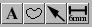
<style>
.page{position:relative;width:92px;height:27px;background:#b8b8b8}
.page>*{position:absolute;margin:0}
.t1{font:17px "TimesNewRomanPS-BoldMT";color:#000000}
.t2{font:9px "TimesNewRomanPSMT";color:#000000}
</style>
<div class="page">
<p class="t1" style="left:6px;top:7px;width:12px;height:12px">A</p>
<p class="t2" style="left:69px;top:15px;width:18px;height:6px">6mm</p>
</div>
